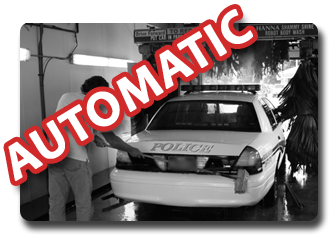
<style>
.page{position:relative;width:335px;height:235px}
.page>*{position:absolute;margin:0}
.t1{font:50.4px "Candara-Bold";color:#ffffff;font-weight:bold}
</style>
<div class="page">
<p class="t1" style="left:8px;top:9px;width:245px;height:172px;rotate:-31deg">AUTOMATIC</p>
</div>
